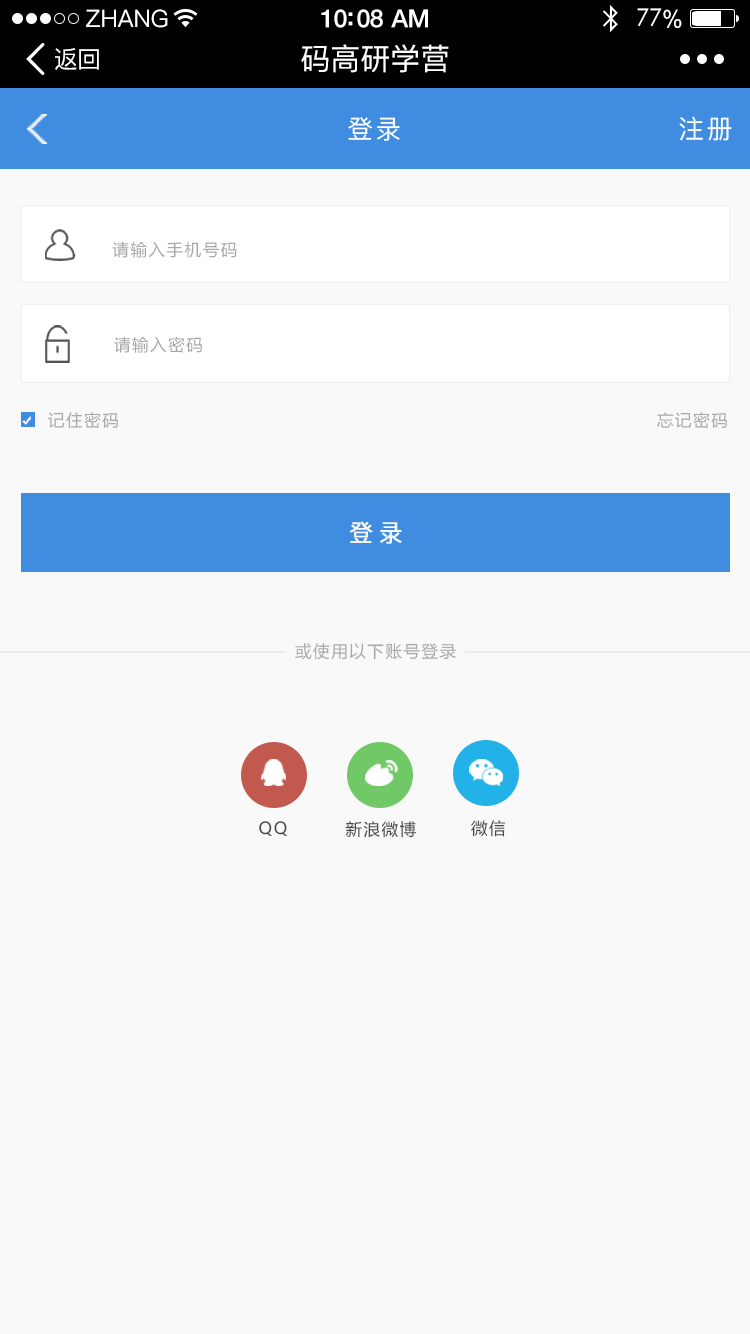
<style>
.page{position:relative;width:750px;height:1334px;background:#f9f9f9}
.page>*{position:absolute;margin:0}
.t1{font:24px "PingFang-SC-Medium";color:#ffffff}
.t2{font:25px "HelveticaNeue-Medium";letter-spacing:-0.02em;color:#ffffff}
.t3{font:24px "STXihei";letter-spacing:-0.02em;color:#ffffff}
.t4{font:24px "ArialUnicodeMS";letter-spacing:-0.02em;color:#ffffff}
.t5{font:24px "PingFang-SC-Medium";letter-spacing:-0.02em;color:#ffffff}
.t6{font:30px "PingFang-SC-Medium";color:#ffffff}
.t7{font:26px "PingFang-SC-Medium";letter-spacing:0.1em;color:#ffffff}
.t8{font:16.4px "MicrosoftYaHei";letter-spacing:0.1em;color:#a7a7a7}
.t9{font:16.4px "MicrosoftYaHei";letter-spacing:0.1em;color:#aaaaaa}
.t10{font:24px "PingFang-SC-Medium";letter-spacing:0.2em;color:#f7f7f7;font-weight:bold}
.t11{font:16.4px "MicrosoftYaHei";letter-spacing:0.1em;color:#494949}
</style>
<div class="page">
<p class="t1" style="left:86px;top:9px;width:82px;height:19px">ZHANG</p>
<p class="t2" style="left:321px;top:9px;width:107px;height:19px">10:08 AM</p>
<p class="t3" style="left:637px;top:8px;width:45px;height:20px">77<span class="t4">%</span></p>
<p class="t5" style="left:55px;top:48px;width:44px;height:22px">返回</p>
<p class="t6" style="left:301px;top:44px;width:148px;height:29px">码高研学营</p>
<p class="t7" style="left:348px;top:117px;width:52px;height:24px">登录</p>
<p class="t7" style="left:679px;top:116px;width:53px;height:25px">注册</p>
<p class="t8" style="left:112px;top:241px;width:125px;height:17px">请输入手机号码</p>
<p class="t8" style="left:114px;top:336px;width:88px;height:17px">请输入密码</p>
<p class="t9" style="left:48px;top:412px;width:70px;height:17px">记住密码</p>
<p class="t9" style="left:657px;top:412px;width:70px;height:16px">忘记密码</p>
<p class="t10" style="left:349px;top:521px;width:53px;height:23px">登录</p>
<p class="t9" style="left:295px;top:643px;width:161px;height:17px">或使用以下账号登录</p>
<p class="t11" style="left:259px;top:821px;width:29px;height:15px">QQ</p>
<p class="t11" style="left:345px;top:821px;width:71px;height:17px">新浪微博</p>
<p class="t11" style="left:471px;top:820px;width:35px;height:17px">微信</p>
</div>
